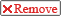
<style>
.page{position:relative;width:61px;height:16px;background:#ffffff}
.page>*{position:absolute;margin:0}
.t1{font:13px "TimesNewRomanPSMT";color:#dc2525}
</style>
<div class="page">
<p class="t1" style="left:14px;top:4px;width:44px;height:9px">Remove</p>
</div>
